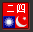
<style>
.page{position:relative;width:33px;height:32px;background:#f20000}
.page>*{position:absolute;margin:0}
.t1{font:10.4px "SimSun";color:#ffffff}
</style>
<div class="page">
<p class="t1" style="left:7px;top:4px;width:18px;height:9px">二四</p>
</div>
